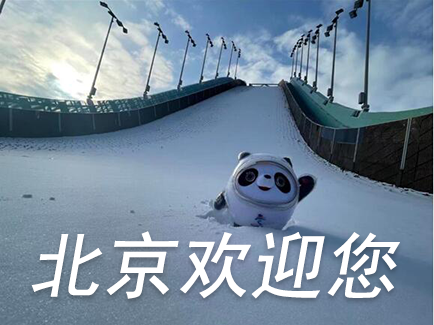
<style>
.page{position:relative;width:434px;height:325px}
.page>*{position:absolute;margin:0}
.t1{font:72px "SimHei";color:#ffffff;font-weight:bold;font-style:italic}
</style>
<div class="page">
<p class="t1" style="left:31px;top:231px;width:369px;height:68px">北京欢迎您</p>
</div>
